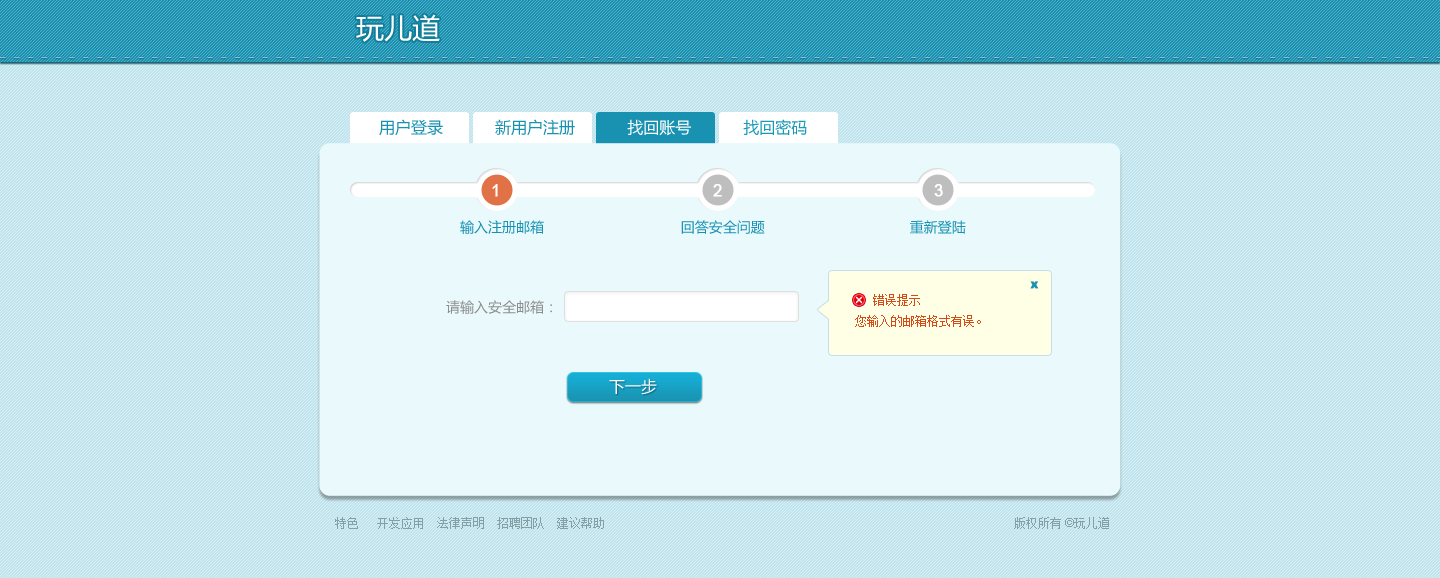
<style>
.page{position:relative;width:1440px;height:578px;background:#bfe4ed}
.page>*{position:absolute;margin:0}
.t1{font:28px "MicrosoftYaHei";color:#ffffff}
.t2{font:16px "MicrosoftYaHei";color:#1992b1}
.t3{font:16px "MicrosoftYaHei";color:#ffffff}
.t4{font:16px "MicrosoftYaHei";color:#1899b9}
.t5{font:16px "ArialMT";color:#ffffff;font-weight:bold}
.t6{font:14px "MicrosoftYaHei";color:#1992b1}
.t7{font:12px "SimSun";color:#d54b17}
.t8{font:14px "MicrosoftYaHei";color:#8e8e8e}
.t9{font:12px "SimSun";color:#849fa6}
.t10{font:12px "ArialMT";color:#849fa6}
</style>
<div class="page">
<p class="t1" style="left:356px;top:14px;width:84px;height:28px">玩儿道</p>
<p class="t2" style="left:379px;top:119px;width:428px;height:17px">用户登录           新用户注册           <span class="t3">找回账号           </span><span class="t4">找回密码</span></p>
<p class="t5" style="left:492px;top:184px;width:6px;height:13px">1</p>
<p class="t5" style="left:713px;top:184px;width:9px;height:13px">2</p>
<p class="t5" style="left:934px;top:184px;width:9px;height:13px">3</p>
<p class="t6" style="left:460px;top:220px;width:506px;height:14px">输入注册邮箱                                 回答安全问题                                   重新登陆</p>
<p class="t7" style="left:855px;top:294px;width:126px;height:33px">错误提示<br>您输入的邮箱格式有误。</p>
<p class="t8" style="left:446px;top:300px;width:106px;height:14px">请输入安全邮箱：</p>
<p class="t3" style="left:609px;top:378px;width:48px;height:17px">下一步</p>
<p class="t9" style="left:335px;top:517px;width:269px;height:12px">特色   开发应用  法律声明  招聘团队  建议帮助</p>
<p class="t9" style="left:1014px;top:517px;width:95px;height:12px">版权所有<span class="t10"> ©</span>玩儿道</p>
</div>
